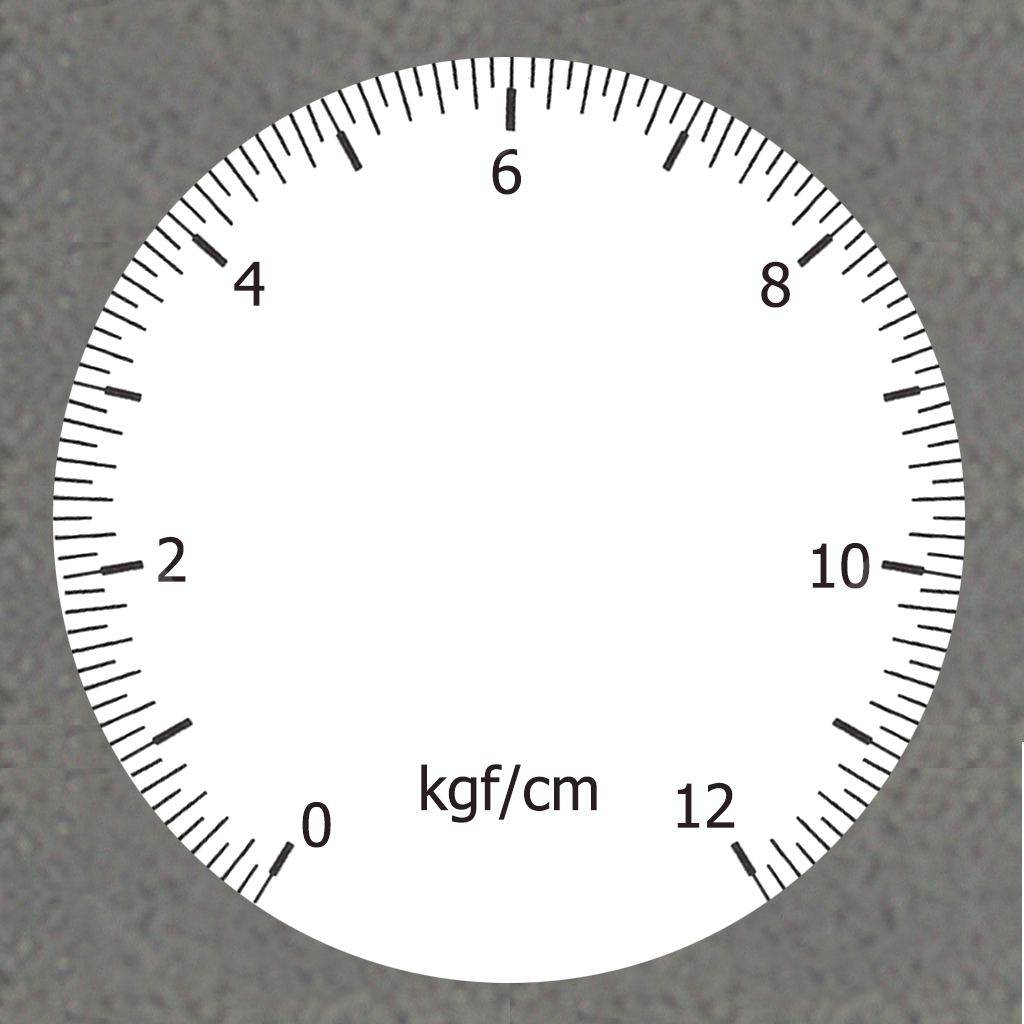
<style>
.page{position:relative;width:1024px;height:1024px;background:#ffffff}
.page>*{position:absolute;margin:0}
.t1{font:60px "Tahoma";color:#281e20}
</style>
<div class="page">
<p class="t1" style="left:492px;top:149px;width:29px;height:46px">6</p>
<p class="t1" style="left:234px;top:261px;width:31px;height:45px">4</p>
<p class="t1" style="left:761px;top:261px;width:29px;height:47px">8</p>
<p class="t1" style="left:158px;top:536px;width:28px;height:46px">2</p>
<p class="t1" style="left:812px;top:543px;width:58px;height:46px">10</p>
<p class="t1" style="left:421px;top:764px;width:176px;height:59px">kgf/cm</p>
<p class="t1" style="left:677px;top:782px;width:58px;height:46px">12</p>
<p class="t1" style="left:302px;top:802px;width:29px;height:46px">0</p>
</div>
